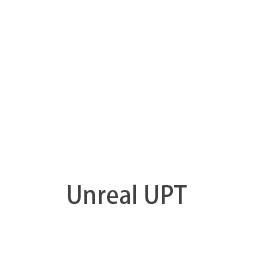
<style>
.page{position:relative;width:256px;height:256px;background:#ffffff}
.page>*{position:absolute;margin:0}
.t1{font:24px "AdobeHeitiStd-Regular";color:#414141}
</style>
<div class="page">
<p class="t1" style="left:68px;top:184px;width:119px;height:20px">Unreal UPT</p>
</div>
